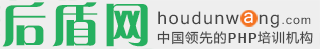
<style>
.page{position:relative;width:320px;height:49px;background:#eeeeee}
.page>*{position:absolute;margin:0}
.t1{font:47.3px "FZCQJW--GB1-0";letter-spacing:0.08em;color:#26b060}
.t2{font:16.9px "Kartika";letter-spacing:0.08em;color:#454545;scale:1.03 1}
.t3{font:11.6px "Kartika";letter-spacing:0.08em;color:#454545;scale:1.03 1}
.t4{font:18.5px "Kartika";letter-spacing:0.08em;color:#ffffff}
.t5{font:12.8px "MicrosoftYaHei";letter-spacing:0.08em;color:#454545}
.t6{font:12.8px "Arial-BoldMT";letter-spacing:0.08em;color:#454545}
</style>
<div class="page">
<p class="t1" style="left:2px;top:2px;width:146px;height:45px">后盾网</p>
<p class="t2" style="left:158px;top:11px;width:153px;height:17px">houdunw  ng<span class="t3">.com</span></p>
<p class="t4" style="left:244px;top:12px;width:9px;height:11px">a</p>
<p class="t5" style="left:157px;top:31px;width:156px;height:14px">中国领先的<span class="t6">PHP</span>培训机构</p>
</div>
